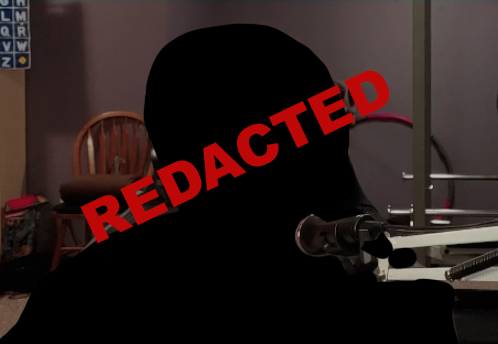
<style>
.page{position:relative;width:498px;height:344px;background:#000000}
.page>*{position:absolute;margin:0}
.t1{font:56px "Arial-Black";color:#be0707}
</style>
<div class="page">
<p class="t1" style="left:80px;top:70px;width:310px;height:174px;rotate:-26deg">REDACTED</p>
</div>
